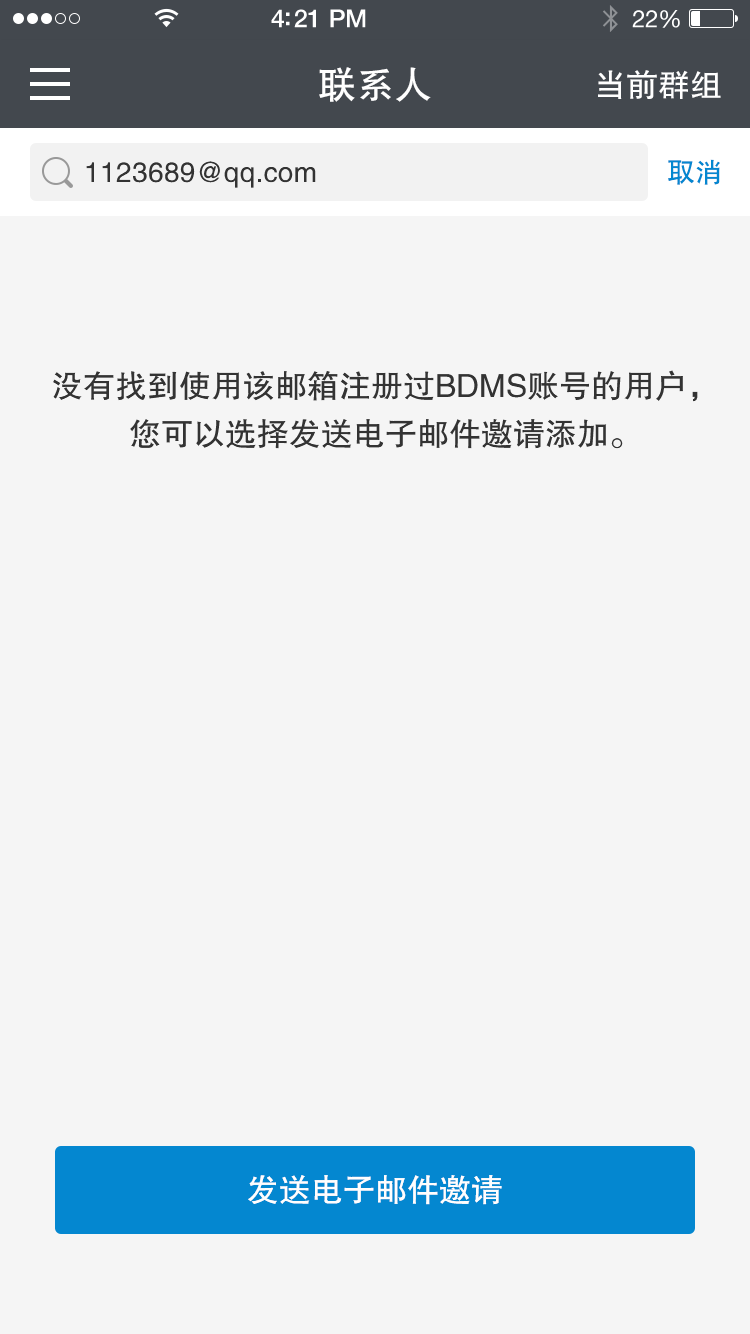
<style>
.page{position:relative;width:750px;height:1334px;background:#f5f5f5}
.page>*{position:absolute;margin:0}
.t1{font:38px "FZHTJW--GB1-0";color:#ffffff}
.t2{font:32px "FZHTJW--GB1-0";color:#ffffff}
.t3{font:28px "FZHTJW--GB1-0";color:#333333}
.t4{font:28px "FZHTJW--GB1-0";color:#0487d0}
.t5{font:32px/48px "FZHTJW--GB1-0";color:#333333}
.t6{font:32px "FZHTJW--GB1-0";color:#fffefe}
</style>
<div class="page">
<p class="t1" style="left:319px;top:67px;width:112px;height:35px">联系人</p>
<p class="t2" style="left:598px;top:70px;width:123px;height:29px">当前群组</p>
<p class="t3" style="left:86px;top:161px;width:230px;height:27px">1123689@qq.com</p>
<p class="t4" style="left:668px;top:159px;width:52px;height:26px">取消</p>
<p class="t5" style="left:53px;top:370px;width:645px;height:79px;text-align:center">没有找到使用该邮箱注册过BDMS账号的用户，<br>您可以选择发送电子邮件邀请添加。</p>
<p class="t6" style="left:248px;top:1175px;width:254px;height:30px">发送电子邮件邀请</p>
</div>
